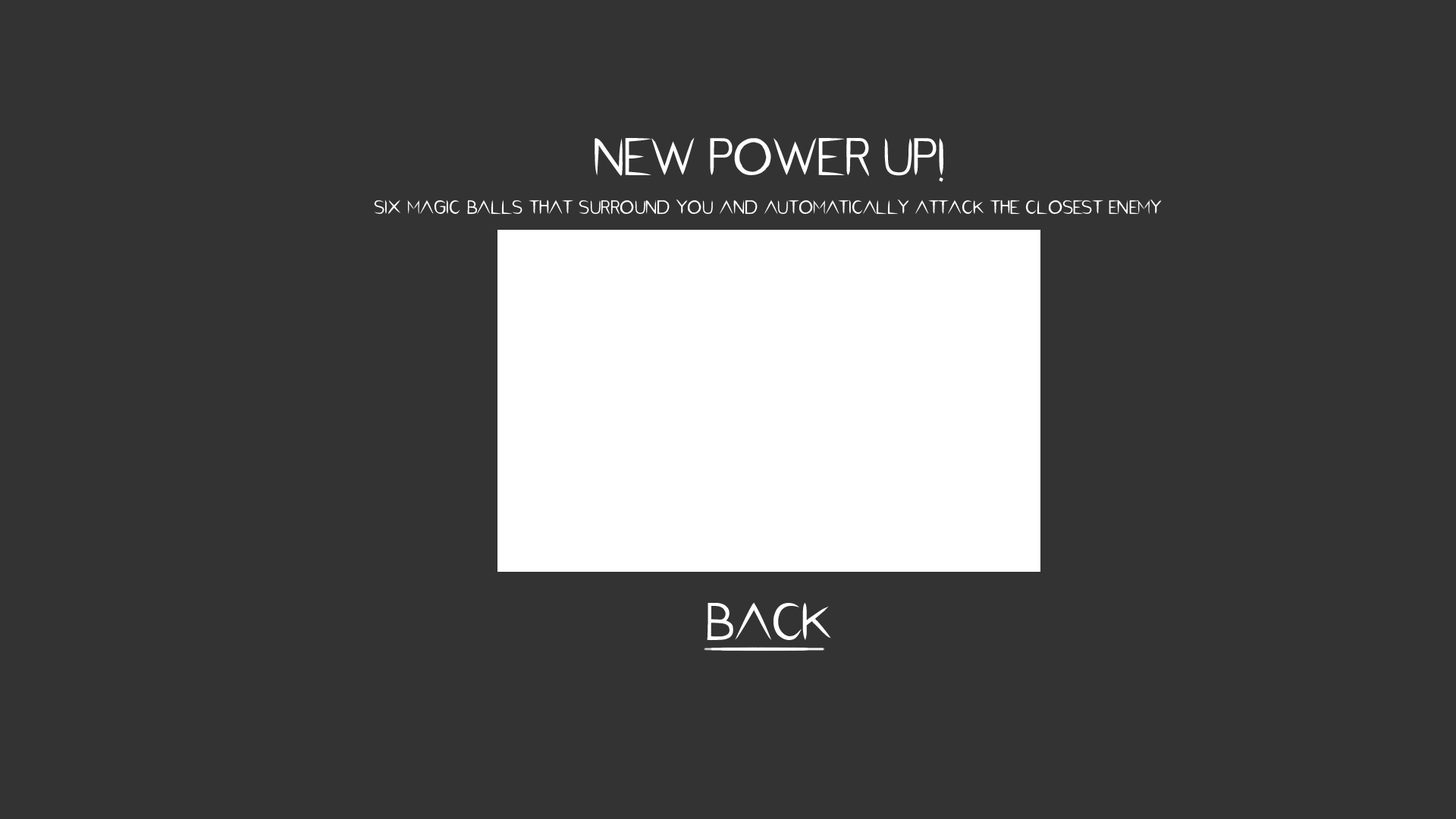
<style>
.page{position:relative;width:1456px;height:819px;background:#333333}
.page>*{position:absolute;margin:0}
.t1{font:53.1px "PentaGrams-Salemica-Regular";color:#ffffff}
.t2{font:26.9px "PentaGrams-Salemica-Regular";color:#ffffff}
</style>
<div class="page">
<p class="t1" style="left:595px;top:137px;width:348px;height:45px">NEW POWER UP!</p>
<p class="t2" style="left:374px;top:199px;width:788px;height:16px">six magic balls that surround you and automatically attack the closest enemy</p>
<p class="t1" style="left:707px;top:602px;width:124px;height:39px">BACK</p>
</div>
